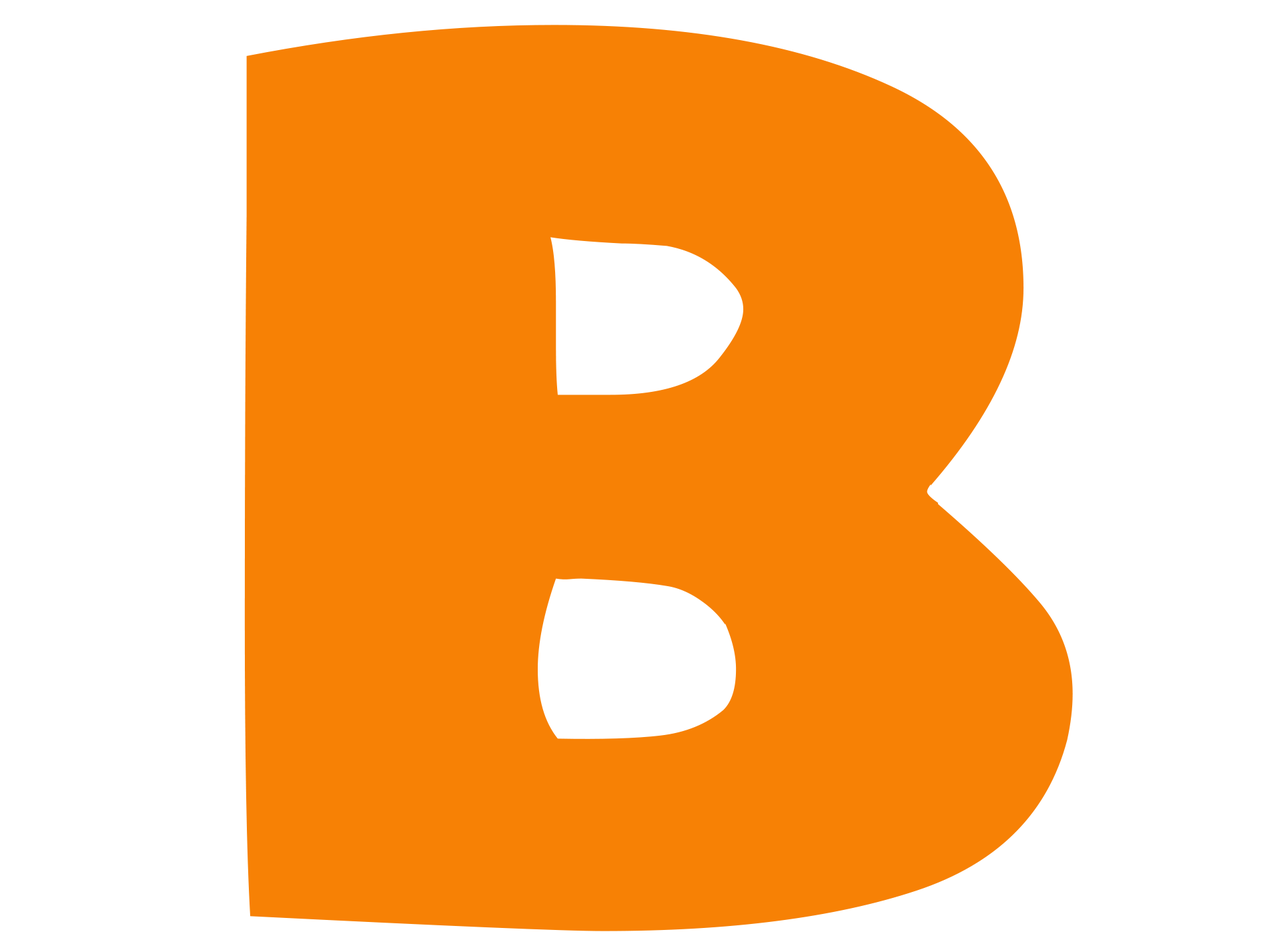
<style>
.page{position:relative;width:1261px;height:946px;background:#f78105}
.page>*{position:absolute;margin:0}
.t1{font:1240.6px "LondrinaSolid-Black";letter-spacing:0.01em;color:#f78105;scale:1.47 1}
</style>
<div class="page">
<p class="t1" style="left:244px;top:25px;width:829px;height:906px">B</p>
</div>
